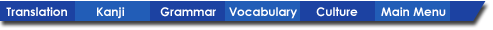
<style>
.page{position:relative;width:493px;height:30px;background:#1c42a2}
.page>*{position:absolute;margin:0}
.t1{font:12px "CenturyGothic-Bold";color:#ffffff}
</style>
<div class="page">
<p class="t1" style="left:6px;top:7px;width:61px;height:9px">Translation</p>
<p class="t1" style="left:97px;top:7px;width:28px;height:12px">Kanji</p>
<p class="t1" style="left:160px;top:7px;width:56px;height:10px">Grammar</p>
<p class="t1" style="left:229px;top:7px;width:68px;height:12px">Vocabulary</p>
<p class="t1" style="left:316px;top:7px;width:42px;height:10px">Culture</p>
<p class="t1" style="left:381px;top:7px;width:65px;height:9px">Main Menu</p>
</div>
